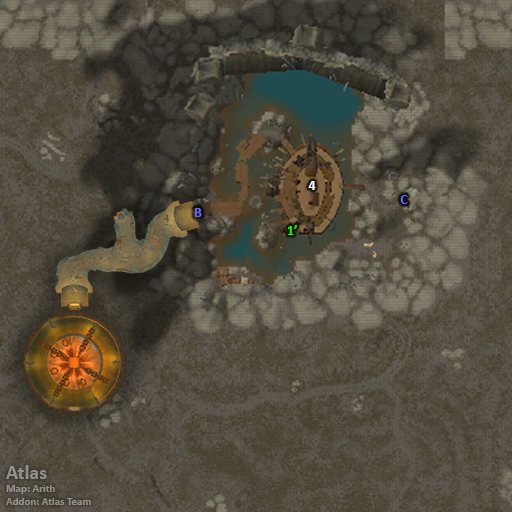
<style>
.page{position:relative;width:512px;height:512px}
.page>*{position:absolute;margin:0}
.t1{font:14px "Calibri-Bold";color:#ffffff}
.t2{font:14px "Calibri-Bold";color:#6666ff}
.t3{font:14px "Calibri-Bold";color:#00ff00}
.t4{font:11px "Calibri-Bold";color:#93908a}
.t5{font:20px "Calibri-Bold";color:#93908a}
</style>
<div class="page">
<p class="t1" style="left:308px;top:181px;width:8px;height:9px">4</p>
<p class="t2" style="left:400px;top:195px;width:8px;height:9px">C</p>
<p class="t2" style="left:194px;top:208px;width:8px;height:9px">B</p>
<p class="t3" style="left:287px;top:225px;width:10px;height:10px">1’</p>
<p class="t4" style="left:6px;top:465px;width:85px;height:40px"><span class="t5">Atlas<br></span>Map: Arith<br>Addon: Atlas Team</p>
</div>
